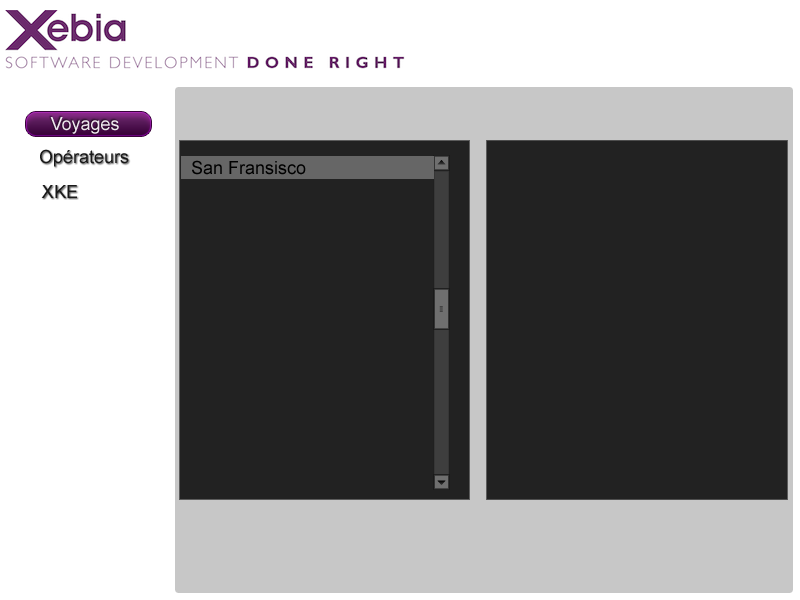
<style>
.page{position:relative;width:800px;height:600px;background:#222222}
.page>*{position:absolute;margin:0}
.t1{font:18px "ArialMT";color:#ffffff}
.t2{font:18px "ArialMT";color:#191919}
.t3{font:18px "ArialMT";color:#000000}
</style>
<div class="page">
<p class="t1" style="left:50px;top:117px;width:69px;height:17px;opacity:0.9">Voyages</p>
<p class="t2" style="left:40px;top:149px;width:89px;height:18px">Opérateurs</p>
<p class="t3" style="left:192px;top:160px;width:114px;height:15px">San Fransisco</p>
<p class="t2" style="left:41px;top:185px;width:36px;height:13px">XKE</p>
</div>
